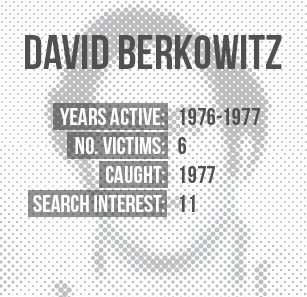
<style>
.page{position:relative;width:307px;height:297px;background:#ffffff}
.page>*{position:absolute;margin:0}
.t1{font:48px "BebasNeue";color:#505050}
.t2{font:24px "BebasNeue";color:#ffffff}
.t3{font:24px/125px "BebasNeue";color:#ffffff}
.t4{font:24px/125px "BebasNeue";color:#505050}
.t5{font:24px "BebasNeue";color:#505050}
</style>
<div class="page">
<p class="t1" style="left:25px;top:35px;width:257px;height:34px">DAVID BERKOWITZ</p>
<p class="t2" style="left:33px;top:108px;width:132px;height:104px;text-align:right"><span class="t3">YEARS ACTIVE:<br></span>No. Victims:<br>cAUGHT:<br>SEARCH INTEREST:</p>
<p class="t4" style="left:178px;top:108px;width:82px;height:104px">1976-1977<br><span class="t5">6<br>1977<br>11</span></p>
</div>
